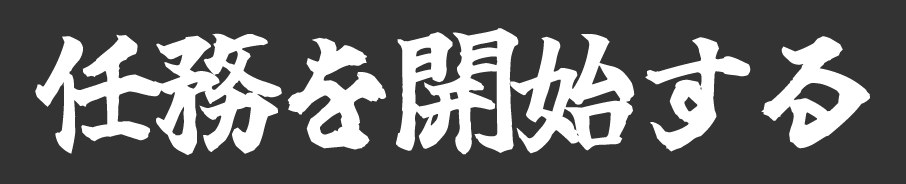
<style>
.page{position:relative;width:906px;height:184px;background:#333333}
.page>*{position:absolute;margin:0}
.t1{font:120px "Tamanegi-Kaisho-Geki-FreeVer-7";color:#ffffff}
</style>
<div class="page">
<p class="t1" style="left:35px;top:28px;width:835px;height:127px">任務を開始する</p>
</div>
